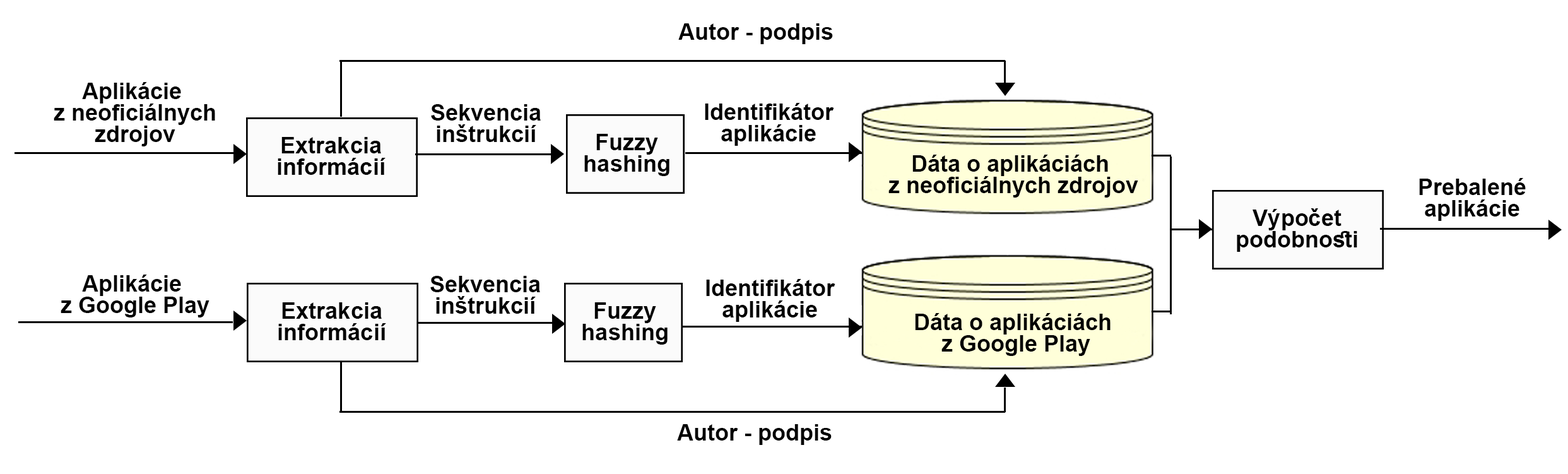
<style>
.page{position:relative;width:1568px;height:474px;background:#ffffff}
.page>*{position:absolute;margin:0}
.t1{font:22.7px "Arial-BoldMT";color:#000000}
.t2{font:22.7px/10.7px "Arial-BoldMT";color:#000000}
</style>
<div class="page">
<p class="t1" style="left:678px;top:23px;width:155px;height:21px">Autor - podpis</p>
<p class="t2" style="left:54px;top:82px;width:161px;height:64px;text-align:center">Aplikácie <br><br>z neoficiálnych<br><br>zdrojov</p>
<p class="t2" style="left:431px;top:104px;width:110px;height:38px;text-align:center">Sekvencia<br><br>inštrukcií</p>
<p class="t2" style="left:705px;top:103px;width:129px;height:43px;text-align:center">Identifikátor<br><br>aplikácie</p>
<p class="t2" style="left:278px;top:137px;width:108px;height:38px;text-align:center">Extrakcia<br><br>informácií</p>
<p class="t2" style="left:584px;top:134px;width:85px;height:42px;text-align:center">Fuzzy<br><br>hashing</p>
<p class="t2" style="left:888px;top:155px;width:250px;height:42px;text-align:center">Dáta o aplikáciách <br><br>z neoficiálnych zdrojov</p>
<p class="t2" style="left:1419px;top:178px;width:107px;height:43px;text-align:center">Prebalené<br><br>aplikácie</p>
<p class="t2" style="left:1237px;top:208px;width:120px;height:44px;text-align:center">Výpočet <br><br>podobnosti</p>
<p class="t2" style="left:61px;top:274px;width:148px;height:43px;text-align:center">Aplikácie <br><br>z Google Play</p>
<p class="t2" style="left:430px;top:276px;width:110px;height:38px;text-align:center">Sekvencia<br><br>inštrukcií</p>
<p class="t2" style="left:706px;top:279px;width:129px;height:43px;text-align:center">Identifikátor<br><br>aplikácie</p>
<p class="t2" style="left:278px;top:302px;width:108px;height:38px;text-align:center">Extrakcia<br><br>informácií</p>
<p class="t2" style="left:582px;top:302px;width:86px;height:43px;text-align:center">Fuzzy<br><br>hashing</p>
<p class="t2" style="left:915px;top:313px;width:196px;height:43px;text-align:center">Dáta o aplikáciách <br><br>z Google Play</p>
<p class="t1" style="left:677px;top:424px;width:155px;height:21px">Autor - podpis</p>
</div>
